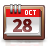
<style>
.page{position:relative;width:48px;height:48px;background:#ffffff}
.page>*{position:absolute;margin:0}
.t1{font:17.8px "DroidSans-Bold"}
</style>
<div class="page">
<p class="t1" style="left:13px;top:19px;width:19px;height:13px">28</p>
</div>
